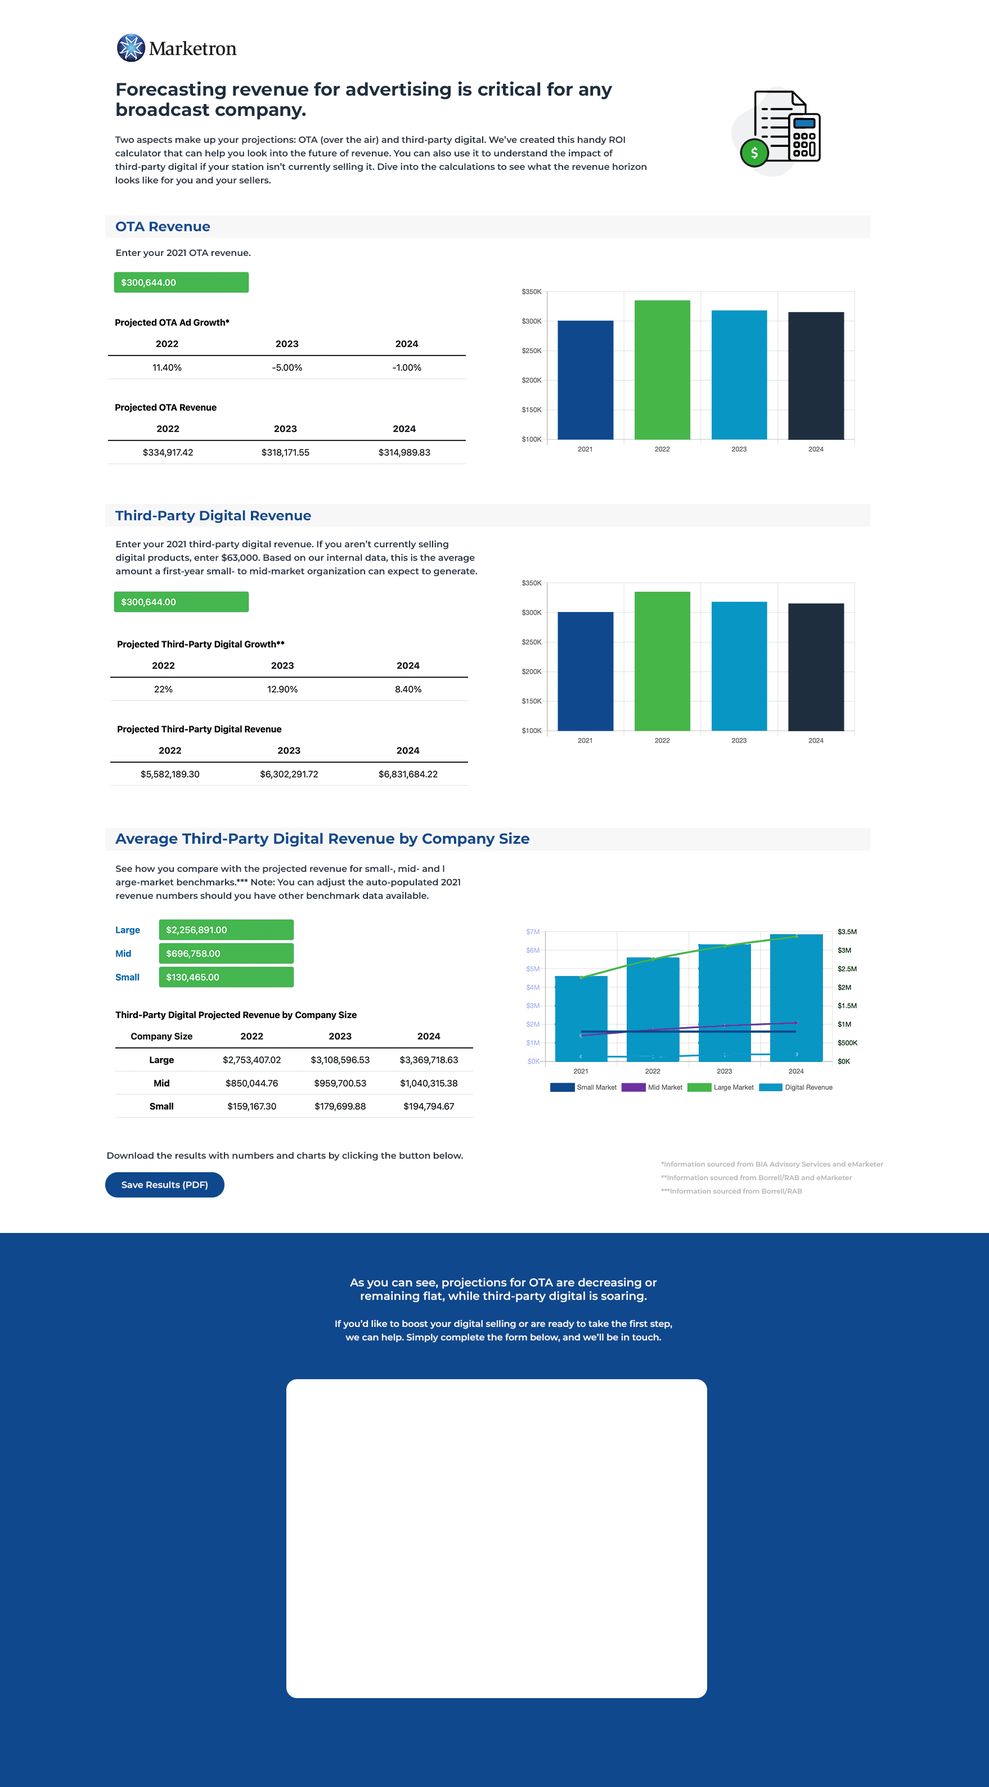
<style>
.page{position:relative;width:989px;height:1787px;background:#ffffff}
.page>*{position:absolute;margin:0}
.t1{font:9px/13.5px "Montserrat-SemiBold";color:#1f2e3e}
.t2{font:18px/20.2px "Montserrat-Bold";color:#1f2e3e}
.t3{font:13.5px "Montserrat-Bold";color:#0f488d}
.t4{font:9px "Montserrat-SemiBold";color:#1f2e3e}
.t5{font:14.6px "Montserrat-Bold";color:#0f488d}
.t6{font:6.8px/13.5px "Montserrat-SemiBold";color:#b0b1b4}
.t7{font:9px "Montserrat-SemiBold";color:#fefeff}
.t8{font:9px/13.5px "Montserrat-SemiBold";color:#ffffff}
.t9{font:11.2px/13.5px "Montserrat-SemiBold";color:#ffffff}
</style>
<div class="page">
<p class="t1" style="left:115px;top:81px;width:532px;height:105px"><span class="t2">Forecasting revenue for advertising is critical for any broadcast company. <br></span><br>Two aspects make up your projections: OTA (over the air) and third-party digital. We’ve created this handy ROI calculator that can help you look into the future of revenue. You can also use it to understand the impact of third-party digital if your station isn’t currently selling it. Dive into the calculations to see what the revenue horizon looks like for you and your sellers.</p>
<p class="t3" style="left:116px;top:222px;width:94px;height:10px">OTA Revenue</p>
<p class="t4" style="left:116px;top:249px;width:135px;height:9px">Enter your 2021 OTA revenue.</p>
<p class="t3" style="left:115px;top:510px;width:196px;height:13px">Third-Party Digital Revenue</p>
<p class="t1" style="left:116px;top:540px;width:361px;height:37px">Enter your 2021 third-party digital revenue. If you aren’t currently selling <br>digital products, enter $63,000. Based on our internal data, this is the average <br>amount a first-year small- to mid-market organization can expect to generate.</p>
<p class="t5" style="left:115px;top:832px;width:414px;height:15px">Average Third-Party Digital Revenue by Company Size</p>
<p class="t1" style="left:116px;top:865px;width:344px;height:36px">See how you compare with the projected revenue for small-, mid- and l<br>arge-market benchmarks.*** Note: You can adjust the auto-populated 2021 <br>revenue numbers should you have other benchmark data available.</p>
<p class="t4" style="left:107px;top:1151px;width:356px;height:10px">Download the results with numbers and charts by clicking the button below.</p>
<p class="t6" style="left:661px;top:1161px;width:223px;height:34px">*Information sourced from BIA Advisory Services and eMarketer<br>**Information sourced from Borrell/RAB and eMarketer<br>***Information sourced from Borrell/RAB</p>
<p class="t7" style="left:122px;top:1181px;width:86px;height:9px">Save Results (PDF)</p>
<p class="t8" style="left:335px;top:1277px;width:337px;height:66px;text-align:center"><span class="t9">As you can see, projections for OTA are decreasing or remaining flat, while third-party digital is soaring. <br></span><br>If you’d like to boost your digital selling or are ready to take the first step, we can help. Simply complete the form below, and we’ll be in touch.</p>
</div>
